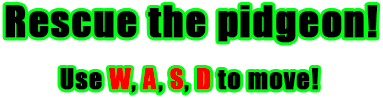
<style>
.page{position:relative;width:383px;height:98px;background:#ffffff}
.page>*{position:absolute;margin:0}
.t1{font:40px "Impact";letter-spacing:0.025em;color:#000000;font-weight:bold}
.t2{font:26px "Impact";letter-spacing:0.025em;color:#000000;font-weight:bold}
.t3{font:26px "Impact";letter-spacing:0.025em;color:#ff0000;font-weight:bold}
</style>
<div class="page">
<p class="t1" style="left:5px;top:5px;width:373px;height:38px">Rescue the pidgeon!</p>
<p class="t2" style="left:60px;top:68px;width:259px;height:25px">Use <span class="t3">W</span>, <span class="t3">A</span>, <span class="t3">S</span>, <span class="t3">D</span> to move!</p>
</div>
